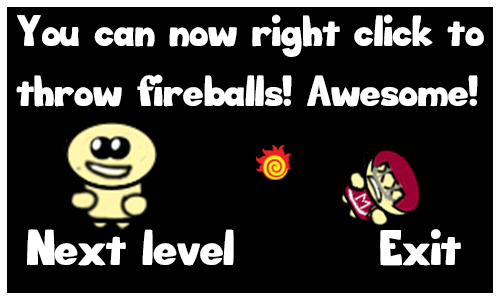
<style>
.page{position:relative;width:500px;height:300px;background:#000000}
.page>*{position:absolute;margin:0}
.t1{font:26px/60px "Big_Bottom_Cartoon";color:#ffffff}
.t2{font:30px "Big_Bottom_Cartoon";color:#ffffff}
.t3{font:29.8px "Big_Bottom_Cartoon";color:#ffffff}
</style>
<div class="page">
<p class="t1" style="left:16px;top:14px;width:468px;height:93px">You can now right click to throw fireballs! Awesome!</p>
<p class="t2" style="left:27px;top:229px;width:207px;height:37px">Next level</p>
<p class="t3" style="left:380px;top:229px;width:81px;height:37px">Exit</p>
</div>
